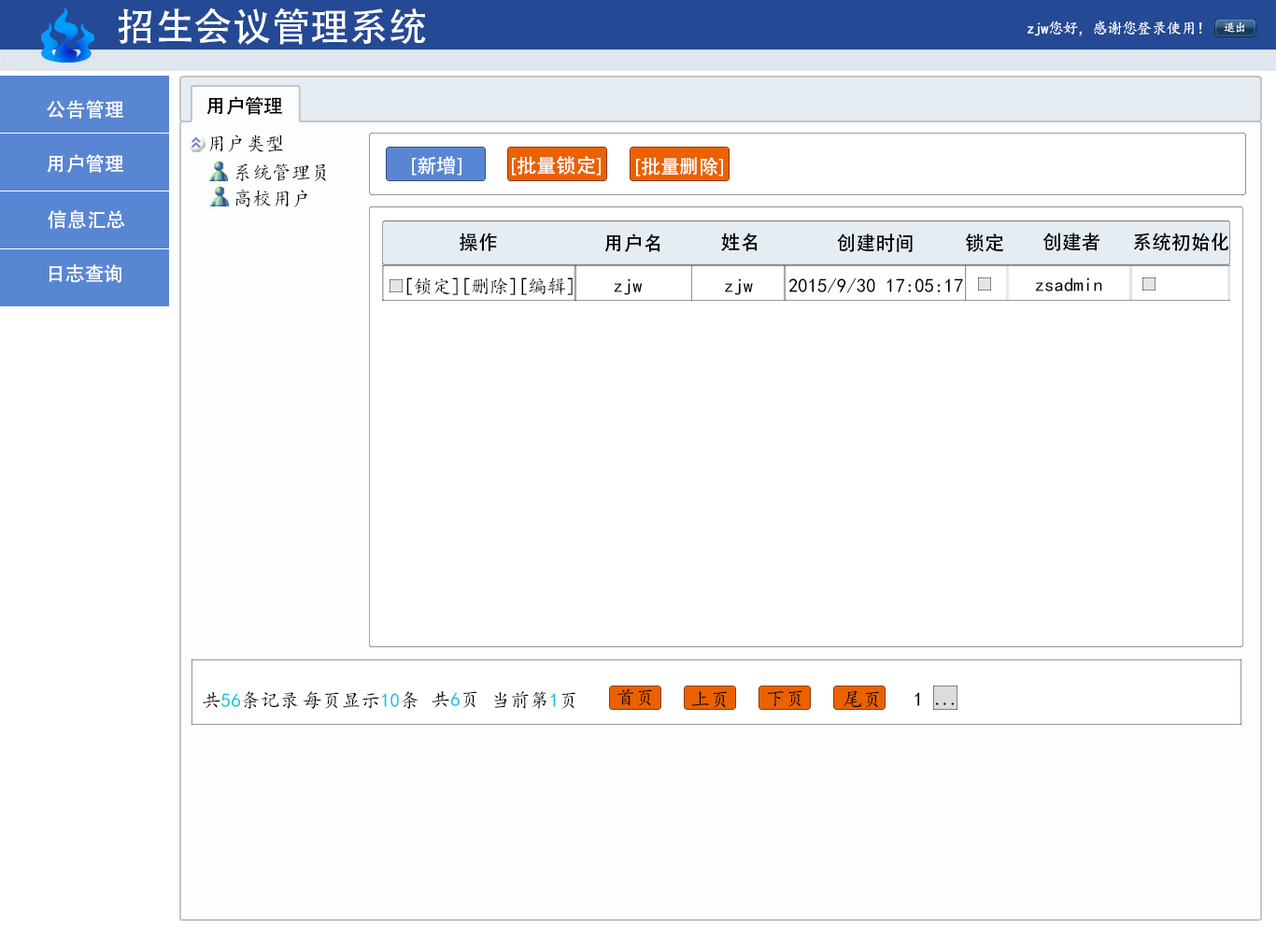
<style>
.page{position:relative;width:1276px;height:934px;background:#ffffff}
.page>*{position:absolute;margin:0}
.t1{font:38.9px "AdobeHeitiStd-Regular";color:#ffffff}
.t2{font:15.6px "KaiTi";letter-spacing:-0.05em;color:#ffffff}
.t3{font:11.7px "KaiTi";letter-spacing:-0.05em;color:#ffffff}
.t4{font:19.5px "AdobeHeitiStd-Regular";color:#fefefe}
.t5{font:19.5px "AdobeHeitiStd-Regular";color:#000000}
.t6{font:19.5px "KaiTi";color:#000000}
.t7{font:19.5px "AdobeHeitiStd-Regular";color:#ffffff}
.t8{font:19.5px "KaiTi";color:#10c6e1}
.t9{font:19.5px "KaiTi";letter-spacing:-0.1em;color:#000000}
</style>
<div class="page">
<p class="t1" style="left:118px;top:7px;width:308px;height:38px">招生会议管理系统</p>
<p class="t2" style="left:1028px;top:21px;width:174px;height:15px">zjw您好，感谢您登录使用！</p>
<p class="t3" style="left:1224px;top:22px;width:21px;height:11px">退出</p>
<p class="t4" style="left:47px;top:100px;width:76px;height:19px">公告管理</p>
<p class="t5" style="left:206px;top:96px;width:76px;height:19px">用户管理</p>
<p class="t6" style="left:209px;top:135px;width:74px;height:17px">用户类型</p>
<p class="t4" style="left:47px;top:154px;width:76px;height:19px">用户管理</p>
<p class="t7" style="left:412px;top:156px;width:50px;height:20px">[新增]</p>
<p class="t7" style="left:512px;top:156px;width:89px;height:20px">[批量锁定]</p>
<p class="t7" style="left:636px;top:157px;width:87px;height:20px">[批量删除]</p>
<p class="t6" style="left:236px;top:164px;width:90px;height:17px">系统管理员</p>
<p class="t6" style="left:235px;top:190px;width:72px;height:17px">高校用户</p>
<p class="t4" style="left:48px;top:210px;width:77px;height:19px">信息汇总</p>
<p class="t5" style="left:460px;top:233px;width:37px;height:18px">操作</p>
<p class="t5" style="left:604px;top:234px;width:57px;height:18px">用户名</p>
<p class="t5" style="left:721px;top:233px;width:37px;height:18px">姓名</p>
<p class="t5" style="left:837px;top:234px;width:76px;height:18px">创建时间</p>
<p class="t5" style="left:965px;top:234px;width:38px;height:18px">锁定</p>
<p class="t5" style="left:1043px;top:233px;width:57px;height:18px">创建者</p>
<p class="t5" style="left:1133px;top:233px;width:97px;height:18px">系统初始化</p>
<p class="t4" style="left:49px;top:264px;width:72px;height:19px">日志查询</p>
<p class="t6" style="left:406px;top:277px;width:52px;height:18px">[锁定]</p>
<p class="t6" style="left:464px;top:277px;width:52px;height:18px">[删除]</p>
<p class="t6" style="left:521px;top:277px;width:52px;height:18px">[编辑]</p>
<p class="t6" style="left:614px;top:278px;width:29px;height:17px">zjw</p>
<p class="t6" style="left:725px;top:278px;width:28px;height:17px">zjw</p>
<p class="t6" style="left:789px;top:277px;width:174px;height:16px">2015/9/30 17:05:17</p>
<p class="t6" style="left:1035px;top:277px;width:67px;height:15px">zsadmin</p>
<p class="t6" style="left:618px;top:689px;width:34px;height:17px">首页</p>
<p class="t6" style="left:203px;top:691px;width:95px;height:18px">共<span class="t8">56</span>条记录</p>
<p class="t6" style="left:303px;top:691px;width:116px;height:18px">每页显示<span class="t8">10</span>条</p>
<p class="t6" style="left:432px;top:691px;width:45px;height:17px">共<span class="t8">6</span>页</p>
<p class="t6" style="left:494px;top:691px;width:82px;height:18px">当前第<span class="t8">1</span>页</p>
<p class="t6" style="left:691px;top:691px;width:36px;height:17px">上页</p>
<p class="t6" style="left:767px;top:690px;width:36px;height:17px">下页</p>
<p class="t6" style="left:844px;top:690px;width:35px;height:18px">尾页</p>
<p class="t6" style="left:915px;top:692px;width:5px;height:14px">1</p>
<p class="t9" style="left:935px;top:703px;width:20px;height:2px">...</p>
</div>
